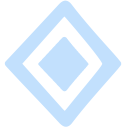
<style>
.page{position:relative;width:128px;height:128px;background:#ffffff}
.page>*{position:absolute;margin:0}
.t1{font:138.6px "EBGaramond-Regular";color:#c2e0fd;scale:1.44 1}
.t2{font:59.8px "EBGaramond-Regular";color:#c2e0fd;scale:1.44 1}
</style>
<div class="page">
<p class="t1" style="left:4px;top:0px;width:118px;height:127px">◇</p>
<p class="t2" style="left:38px;top:36px;width:51px;height:56px">◆</p>
</div>
